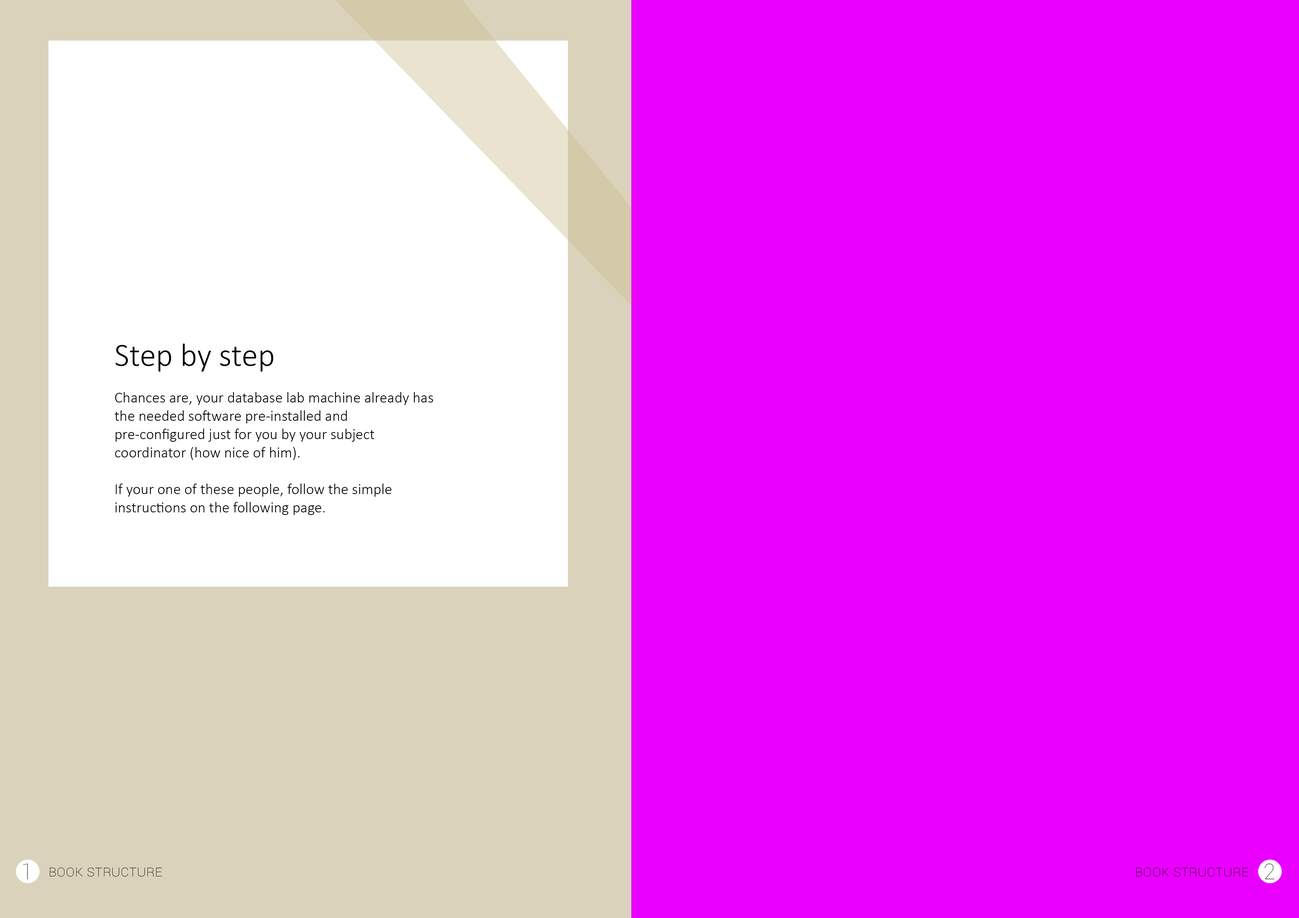
<style>
.page{position:relative;width:1299px;height:918px;background:#ea00ff}
.page>*{position:absolute;margin:0}
.t1{font:15.3px "Calibri-Light";color:#000000}
.t2{font:32.7px "Calibri-Light";color:#000000}
.t3{font:21.8px "Roboto-Thin";color:#484848}
.t4{font:15.3px "Roboto-Thin";color:#000000;font-variant:small-caps}
</style>
<div class="page">
<p class="t1" style="left:115px;top:344px;width:318px;height:171px"><span class="t2">Step by step<br></span><br>Chances are, your database lab machine already has the needed software pre-installed and pre-configured just for you by your subject coordinator (how nice of him). <br><br>If your one of these people, follow the simple instructions on the following page.</p>
<p class="t3" style="left:23px;top:864px;width:5px;height:16px">1</p>
<p class="t4" style="left:50px;top:868px;width:112px;height:9px">Book structure</p>
<p class="t4" style="left:1136px;top:868px;width:112px;height:9px">Book structure</p>
<p class="t3" style="left:1264px;top:864px;width:10px;height:16px">2</p>
</div>
